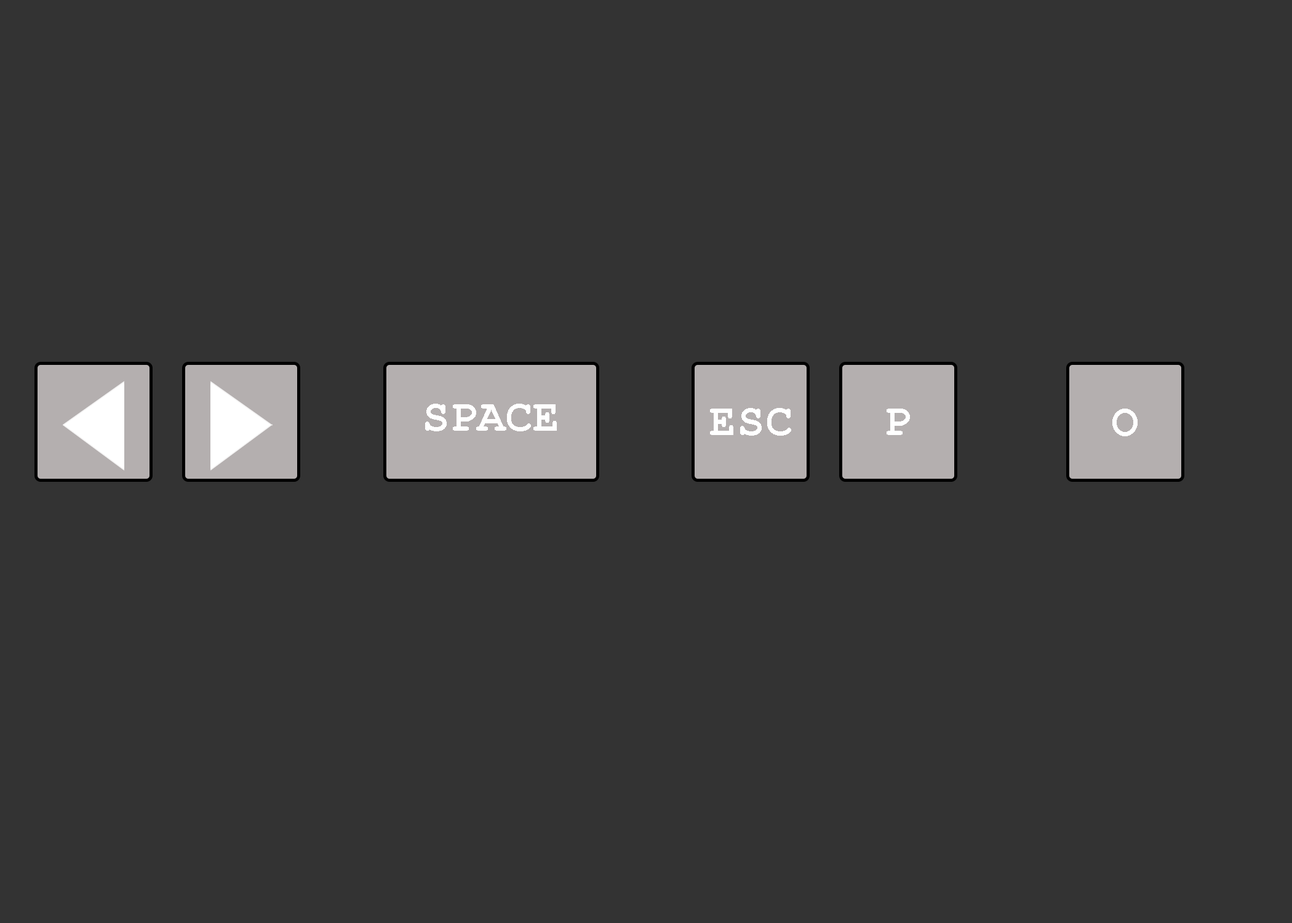
<style>
.page{position:relative;width:1292px;height:923px;background:#333333}
.page>*{position:absolute;margin:0}
.t1{font:46.1px "CourierNewPS-BoldMT";color:#ffffff}
</style>
<div class="page">
<p class="t1" style="left:425px;top:404px;width:132px;height:27px">SPACE</p>
<p class="t1" style="left:710px;top:408px;width:81px;height:28px">ESC</p>
<p class="t1" style="left:887px;top:409px;width:23px;height:26px">P</p>
<p class="t1" style="left:1112px;top:409px;width:26px;height:27px">O</p>
</div>
